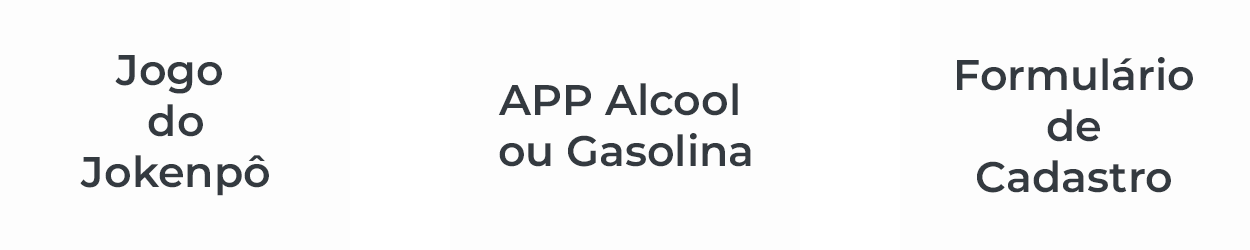
<style>
.page{position:relative;width:1250px;height:250px;background:#fdfdfd}
.page>*{position:absolute;margin:0}
.t1{font:42.7px "Montserrat-SemiBold";color:#343a40}
</style>
<div class="page">
<p class="t1" style="left:80px;top:55px;width:189px;height:141px;text-align:center">Jogo <br>do<br>Jokenpô</p>
<p class="t1" style="left:957px;top:57px;width:236px;height:136px;text-align:center">Formulário<br>de<br>Cadastro</p>
<p class="t1" style="left:498px;top:83px;width:253px;height:84px;text-align:center">APP Alcool <br>ou Gasolina</p>
</div>
